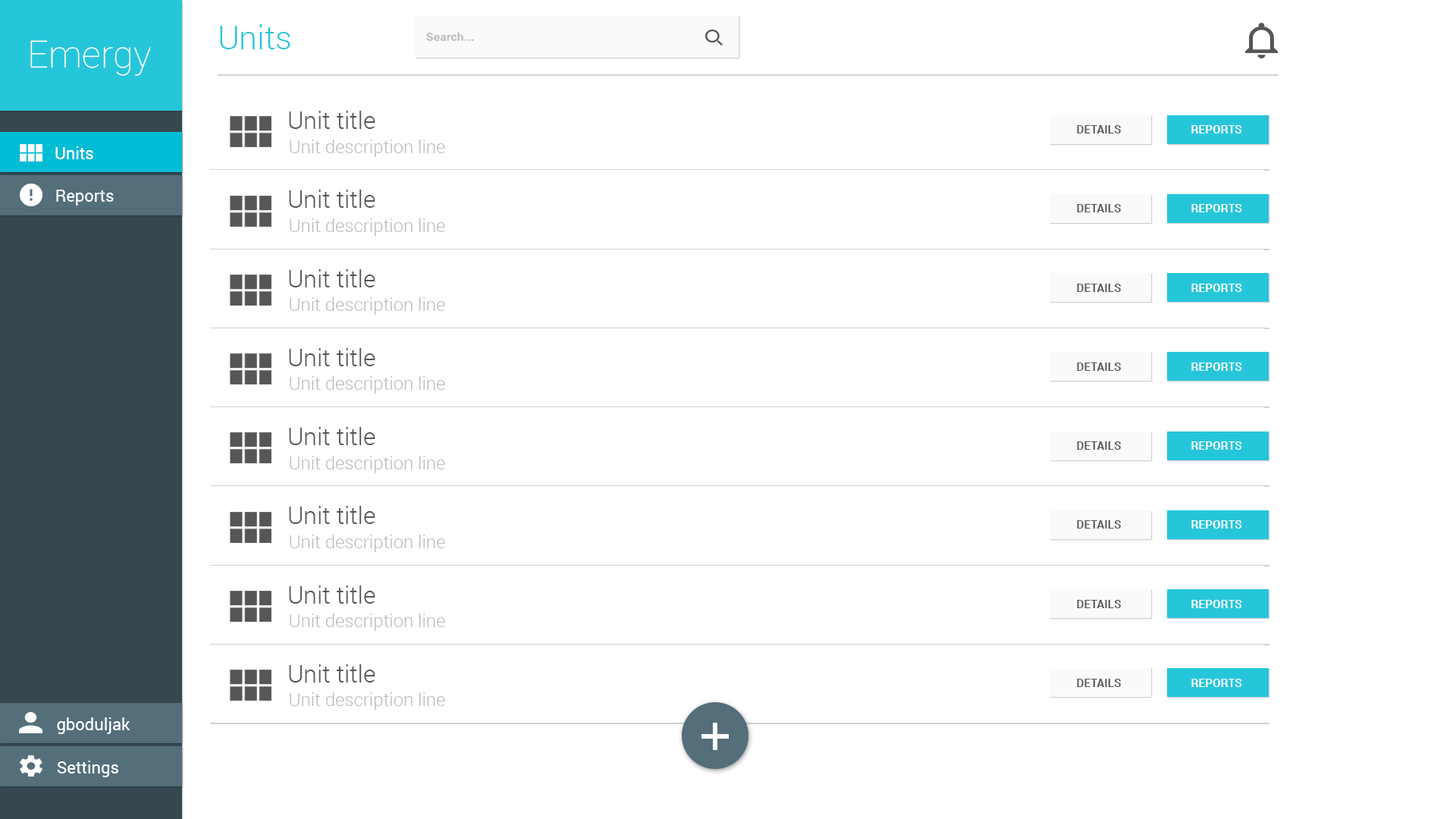
<style>
.page{position:relative;width:1456px;height:819px;background:#ffffff}
.page>*{position:absolute;margin:0}
.t1{font:32.6px "Roboto-Light";color:#26c6da}
.t2{font:37.6px "Roboto-Thin";color:#ffffff}
.t3{font:11.2px "Roboto-Bold";color:#bcbbb9;scale:1.08 1}
.t4{font:24.2px "Roboto-Light";color:#575655}
.t5{font:11.6px "Roboto-Bold";color:#575655}
.t6{font:11.6px "Roboto-Bold";color:#ffffff}
.t7{font:16.7px "Roboto-Regular";color:#ffffff}
.t8{font:18.1px "Roboto-Light";color:#bcbbb9}
</style>
<div class="page">
<p class="t1" style="left:220px;top:24px;width:70px;height:25px">Units</p>
<p class="t2" style="left:30px;top:40px;width:121px;height:36px">Emergy</p>
<p class="t3" style="left:426px;top:32px;width:48px;height:10px">Search...</p>
<p class="t4" style="left:289px;top:111px;width:86px;height:18px">Unit title</p>
<p class="t5" style="left:1077px;top:125px;width:44px;height:8px">DETAILS</p>
<p class="t6" style="left:1191px;top:125px;width:51px;height:8px">REPORTS</p>
<p class="t7" style="left:55px;top:146px;width:38px;height:13px">Units</p>
<p class="t8" style="left:290px;top:140px;width:155px;height:17px">Unit description line</p>
<p class="t7" style="left:56px;top:190px;width:58px;height:16px">Reports</p>
<p class="t4" style="left:289px;top:190px;width:86px;height:18px">Unit title</p>
<p class="t5" style="left:1077px;top:204px;width:44px;height:8px">DETAILS</p>
<p class="t6" style="left:1191px;top:204px;width:51px;height:8px">REPORTS</p>
<p class="t8" style="left:290px;top:218px;width:155px;height:18px">Unit description line</p>
<p class="t4" style="left:289px;top:269px;width:86px;height:18px">Unit title</p>
<p class="t5" style="left:1077px;top:284px;width:44px;height:8px">DETAILS</p>
<p class="t6" style="left:1191px;top:284px;width:51px;height:8px">REPORTS</p>
<p class="t8" style="left:290px;top:297px;width:155px;height:18px">Unit description line</p>
<p class="t4" style="left:289px;top:348px;width:86px;height:18px">Unit title</p>
<p class="t5" style="left:1077px;top:362px;width:44px;height:9px">DETAILS</p>
<p class="t6" style="left:1191px;top:362px;width:51px;height:9px">REPORTS</p>
<p class="t8" style="left:290px;top:376px;width:155px;height:18px">Unit description line</p>
<p class="t4" style="left:289px;top:427px;width:86px;height:18px">Unit title</p>
<p class="t5" style="left:1077px;top:441px;width:44px;height:9px">DETAILS</p>
<p class="t6" style="left:1191px;top:441px;width:51px;height:9px">REPORTS</p>
<p class="t8" style="left:290px;top:456px;width:155px;height:17px">Unit description line</p>
<p class="t4" style="left:289px;top:506px;width:86px;height:18px">Unit title</p>
<p class="t5" style="left:1077px;top:520px;width:44px;height:9px">DETAILS</p>
<p class="t6" style="left:1191px;top:520px;width:51px;height:9px">REPORTS</p>
<p class="t8" style="left:290px;top:535px;width:155px;height:17px">Unit description line</p>
<p class="t4" style="left:289px;top:585px;width:86px;height:19px">Unit title</p>
<p class="t5" style="left:1077px;top:600px;width:44px;height:8px">DETAILS</p>
<p class="t6" style="left:1191px;top:600px;width:51px;height:8px">REPORTS</p>
<p class="t8" style="left:290px;top:613px;width:155px;height:18px">Unit description line</p>
<p class="t4" style="left:289px;top:664px;width:86px;height:18px">Unit title</p>
<p class="t5" style="left:1077px;top:679px;width:44px;height:8px">DETAILS</p>
<p class="t6" style="left:1191px;top:679px;width:51px;height:8px">REPORTS</p>
<p class="t8" style="left:290px;top:692px;width:155px;height:18px">Unit description line</p>
<p class="t7" style="left:57px;top:717px;width:73px;height:17px">gboduljak</p>
<p class="t7" style="left:57px;top:761px;width:61px;height:16px">Settings</p>
</div>
